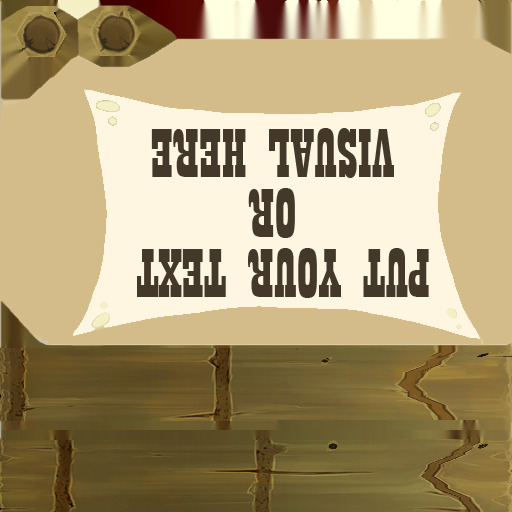
<style>
.page{position:relative;width:512px;height:512px;background:#d4bc8a}
.page>*{position:absolute;margin:0}
.t1{font:72px/60px "Playbill";color:#43382a}
</style>
<div class="page">
<p class="t1" style="left:137px;top:128px;width:292px;height:170px;text-align:center;rotate:180deg">PUT YOUR TEXT <br>OR<br>VISUAL HERE</p>
</div>
